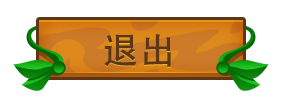
<style>
.page{position:relative;width:287px;height:103px;background:#ffffff}
.page>*{position:absolute;margin:0}
.t1{font:36px "AdobeHeitiStd-Regular";letter-spacing:0.025em;color:#5b3716}
</style>
<div class="page">
<p class="t1" style="left:104px;top:34px;width:67px;height:33px">退出</p>
</div>
